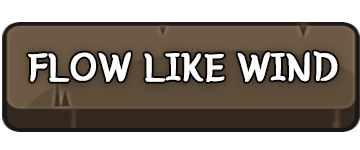
<style>
.page{position:relative;width:360px;height:150px;background:#ffffff}
.page>*{position:absolute;margin:0}
.t1{font:41.7px "BMYEONSUNG";color:#ffffff;text-transform:uppercase;font-weight:bold}
</style>
<div class="page">
<p class="t1" style="left:28px;top:51px;width:310px;height:31px">FLOW LIKE WIND</p>
</div>
